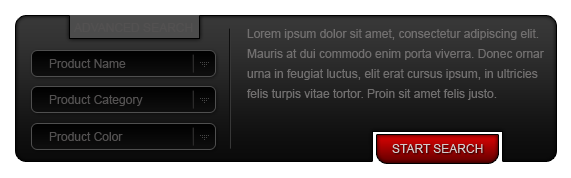
<style>
.page{position:relative;width:571px;height:178px;background:#ffffff}
.page>*{position:absolute;margin:0}
.t1{font:12px "ArialMT";color:#535151}
.t2{font:12px/20px "ArialMT";color:#716f6f}
.t3{font:12px "ArialMT";color:#d4cdcd}
</style>
<div class="page">
<p class="t1" style="left:74px;top:23px;width:119px;height:9px">ADVANCED SEARCH</p>
<p class="t2" style="left:247px;top:29px;width:297px;height:71px">Lorem ipsum dolor sit amet, consectetur adipiscing elit.<br>Mauris at dui commodo enim porta viverra. Donec ornar<br>urna in feugiat luctus, elit erat cursus ipsum, in ultricies<br>felis turpis vitae tortor. Proin sit amet felis justo.</p>
<p class="t1" style="left:49px;top:59px;width:77px;height:9px">Product Name</p>
<p class="t1" style="left:49px;top:95px;width:94px;height:11px">Product Category</p>
<p class="t1" style="left:49px;top:132px;width:74px;height:9px">Product Color</p>
<p class="t3" style="left:392px;top:144px;width:91px;height:9px">START SEARCH</p>
</div>
